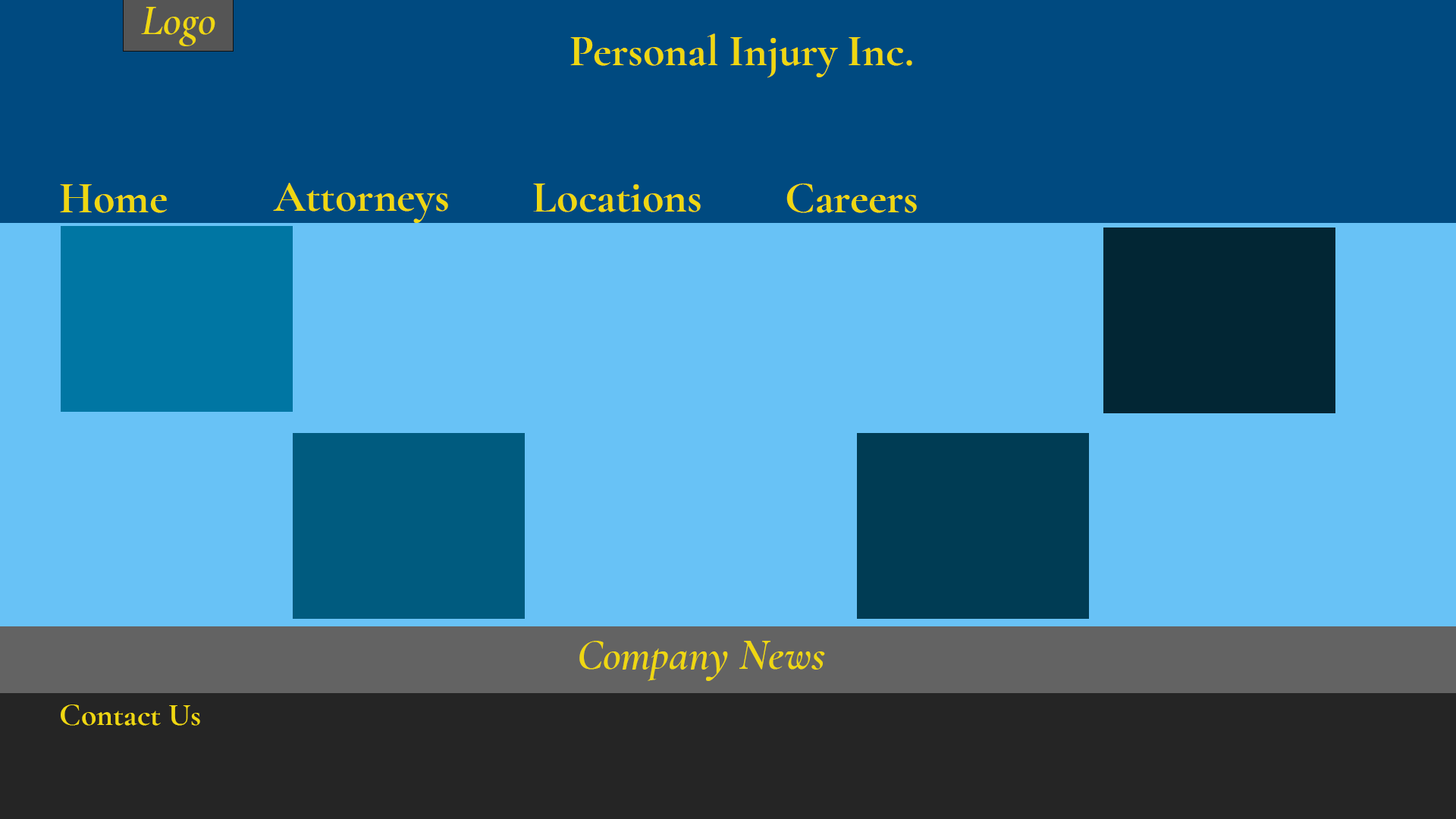
<style>
.page{position:relative;width:1456px;height:819px;background:#68c2f6}
.page>*{position:absolute;margin:0}
.t1{font:44.2px "CormorantGaramond-SemiBoldItalic";color:#efd711}
.t2{font:44.2px "CormorantGaramond-Bold";color:#efd711}
.t3{font:31.6px "CormorantGaramond-Bold";color:#efd711}
</style>
<div class="page">
<p class="t1" style="left:141px;top:7px;width:74px;height:39px">Logo</p>
<p class="t2" style="left:570px;top:33px;width:342px;height:45px">Personal Injury Inc.</p>
<p class="t2" style="left:60px;top:184px;width:107px;height:29px">Home</p>
<p class="t2" style="left:273px;top:183px;width:175px;height:40px">Attorneys</p>
<p class="t2" style="left:533px;top:184px;width:168px;height:28px">Locations</p>
<p class="t2" style="left:786px;top:184px;width:131px;height:29px">Careers</p>
<p class="t1" style="left:579px;top:641px;width:246px;height:40px">Company News</p>
<p class="t3" style="left:61px;top:704px;width:139px;height:22px">Contact Us</p>
</div>
